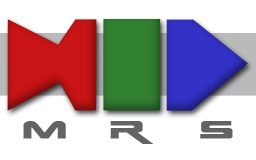
<style>
.page{position:relative;width:256px;height:160px;background:#ffffff}
.page>*{position:absolute;margin:0}
.t1{font:24px "EarthNormal";color:#636363;font-weight:bold;scale:1.44 1}
</style>
<div class="page">
<p class="t1" style="left:23px;top:121px;width:210px;height:23px">M   R    S</p>
</div>
